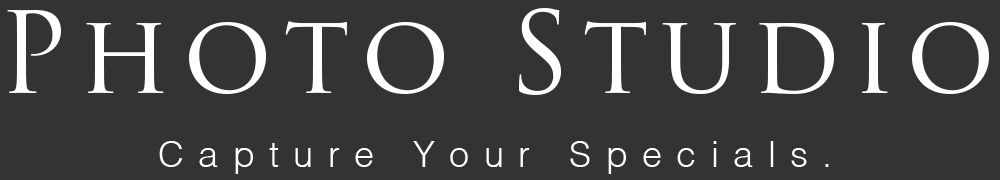
<style>
.page{position:relative;width:1000px;height:180px;background:#333333}
.page>*{position:absolute;margin:0}
.t1{font:110.1px "TrajanPro3-Regular";letter-spacing:0.1em;color:#ffffff}
.t2{font:36px "Helvetica-Light";letter-spacing:0.4em;color:#ffffff}
</style>
<div class="page">
<p class="t1" style="left:7px;top:8px;width:982px;height:87px">Photo Studio</p>
<p class="t2" style="left:159px;top:141px;width:670px;height:33px">Capture Your Specials.</p>
</div>
